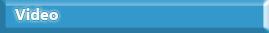
<style>
.page{position:relative;width:269px;height:33px;background:#3399cc}
.page>*{position:absolute;margin:0}
.t1{font:16px "SegoeUI-Bold";color:#ffffff}
</style>
<div class="page">
<p class="t1" style="left:15px;top:8px;width:43px;height:12px">Video</p>
</div>
